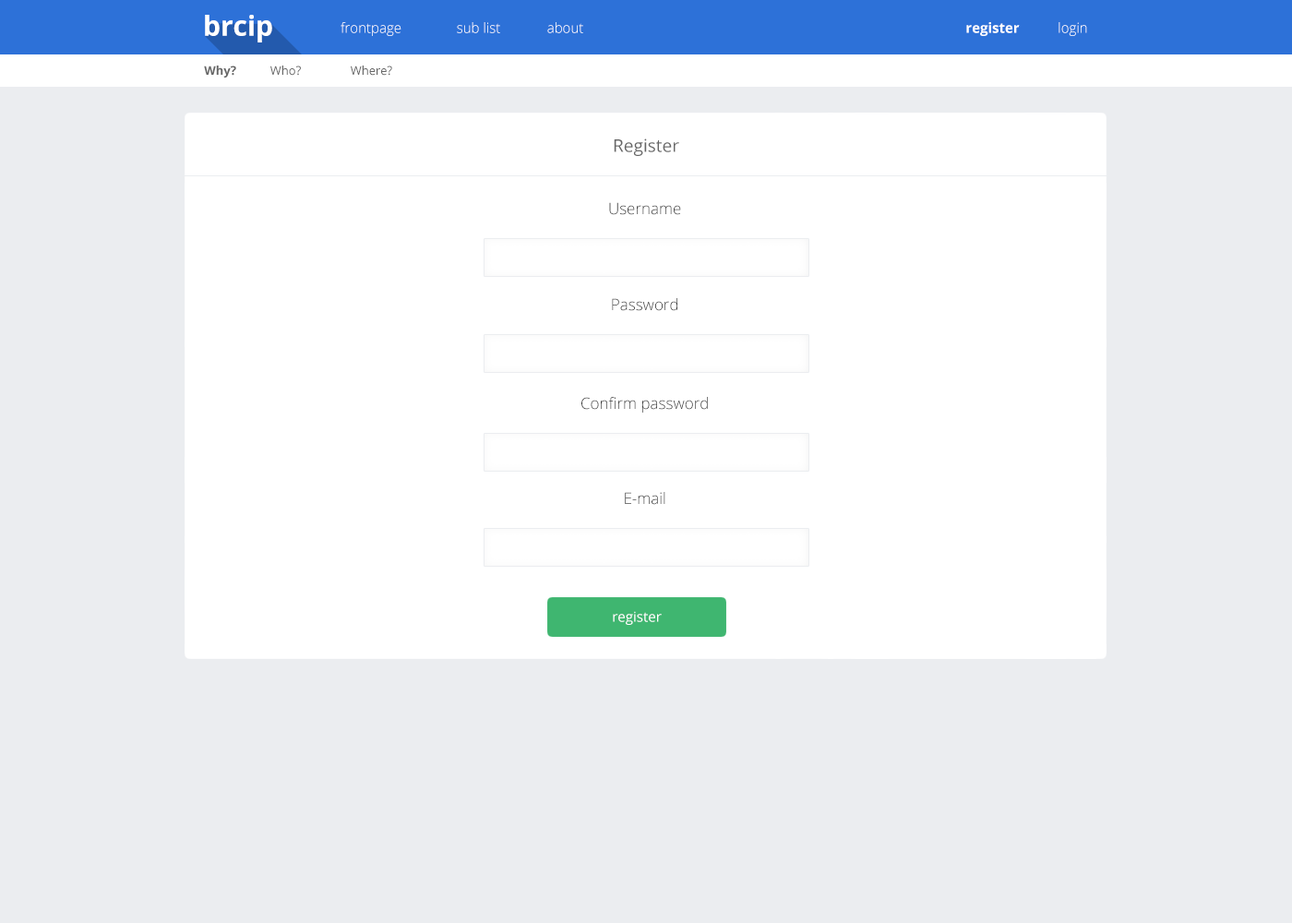
<style>
.page{position:relative;width:1292px;height:923px;background:#ebedf0}
.page>*{position:absolute;margin:0}
.t1{font:27.7px "OpenSans-Bold";color:#ffffff}
.t2{font:13.8px "OpenSans-Light"}
.t3{font:13.8px "OpenSans-Light";color:#ffffff}
.t4{font:13.8px "OpenSans-Bold";color:#ffffff}
.t5{font:12px "OpenSans-Bold";color:#666666}
.t6{font:12px "OpenSans";color:#666666}
.t7{font:17.5px "OpenSans";color:#666666}
.t8{font:15.7px "OpenSans-Light";color:#333333}
.t9{font:13.8px "OpenSans";color:#ffffff}
</style>
<div class="page">
<p class="t1" style="left:205px;top:15px;width:67px;height:27px">brcip</p>
<p class="t2" style="left:341px;top:22px;width:60px;height:14px">frontpage</p>
<p class="t2" style="left:457px;top:22px;width:43px;height:11px">sub list</p>
<p class="t3" style="left:547px;top:22px;width:36px;height:11px">about</p>
<p class="t4" style="left:966px;top:22px;width:54px;height:14px">register</p>
<p class="t3" style="left:1059px;top:22px;width:28px;height:14px">login</p>
<p class="t5" style="left:204px;top:66px;width:32px;height:12px">Why?</p>
<p class="t6" style="left:270px;top:66px;width:31px;height:10px">Who?</p>
<p class="t6" style="left:351px;top:66px;width:41px;height:10px">Where?</p>
<p class="t7" style="left:614px;top:138px;width:65px;height:18px">Register</p>
<p class="t8" style="left:609px;top:202px;width:72px;height:13px">Username</p>
<p class="t8" style="left:612px;top:298px;width:65px;height:13px">Password</p>
<p class="t8" style="left:581px;top:397px;width:127px;height:16px">Confirm password</p>
<p class="t8" style="left:625px;top:492px;width:40px;height:13px">E-mail</p>
<p class="t9" style="left:613px;top:611px;width:49px;height:14px">register</p>
</div>
